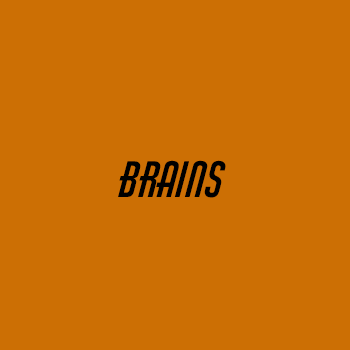
<style>
.page{position:relative;width:350px;height:350px;background:#cc6f04}
.page>*{position:absolute;margin:0}
.t1{font:47.7px "AirAmerica-Regular";color:#000000}
</style>
<div class="page">
<p class="t1" style="left:118px;top:160px;width:108px;height:38px">brains</p>
</div>
